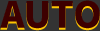
<style>
.page{position:relative;width:100px;height:31px;background:#333333}
.page>*{position:absolute;margin:0}
.t1{font:36px "NotoSansCJKsc-Black";color:#3d0000}
</style>
<div class="page">
<p class="t1" style="left:0px;top:0px;width:100px;height:29px">AUTO</p>
</div>
